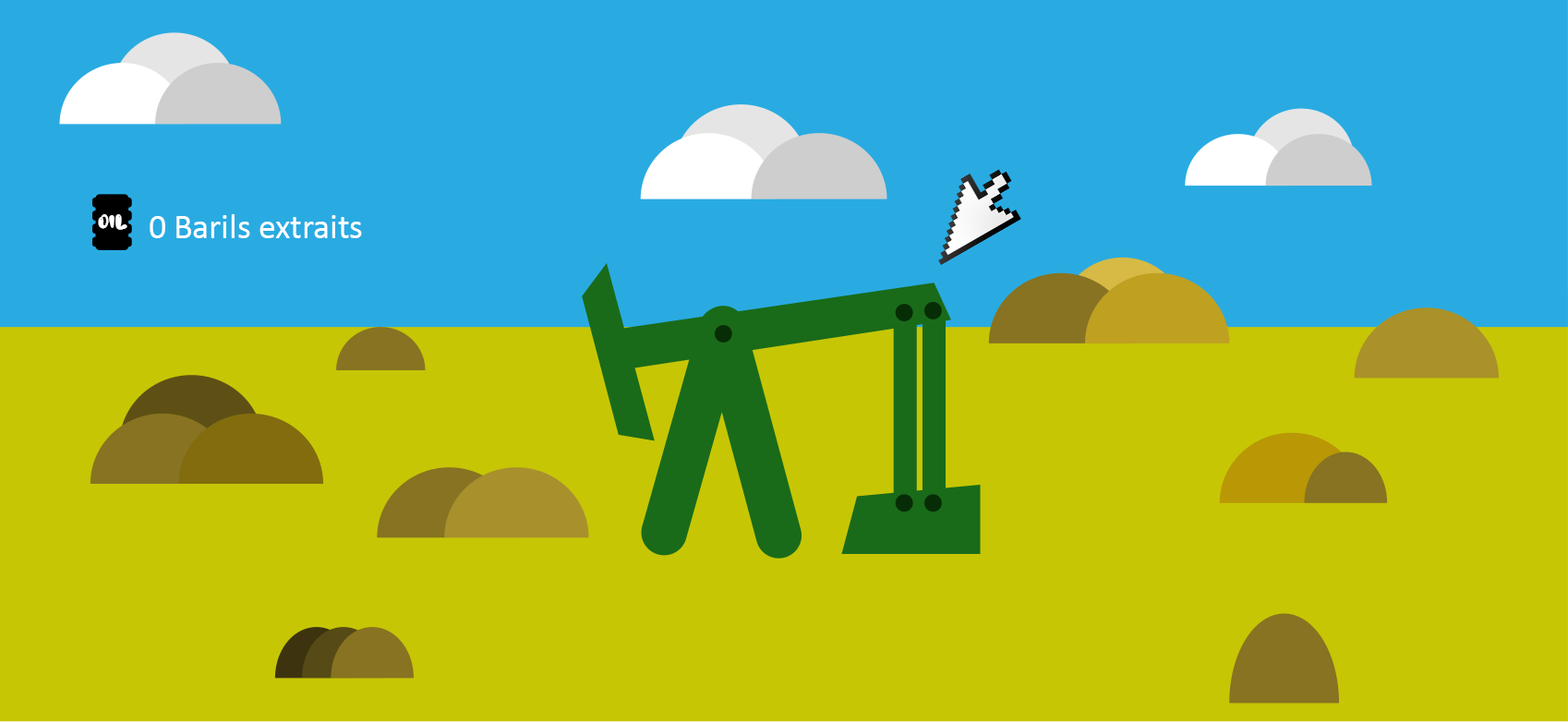
<style>
.page{position:relative;width:1568px;height:722px;background:#c6c605}
.page>*{position:absolute;margin:0}
.t1{font:18.2px "aAlloyInk";color:#ffffff}
.t2{font:34.6px "Calibri";color:#ffffff}
</style>
<div class="page">
<p class="t1" style="left:98px;top:214px;width:29px;height:16px">OIL</p>
<p class="t2" style="left:150px;top:214px;width:212px;height:24px">0 Barils extraits</p>
</div>
